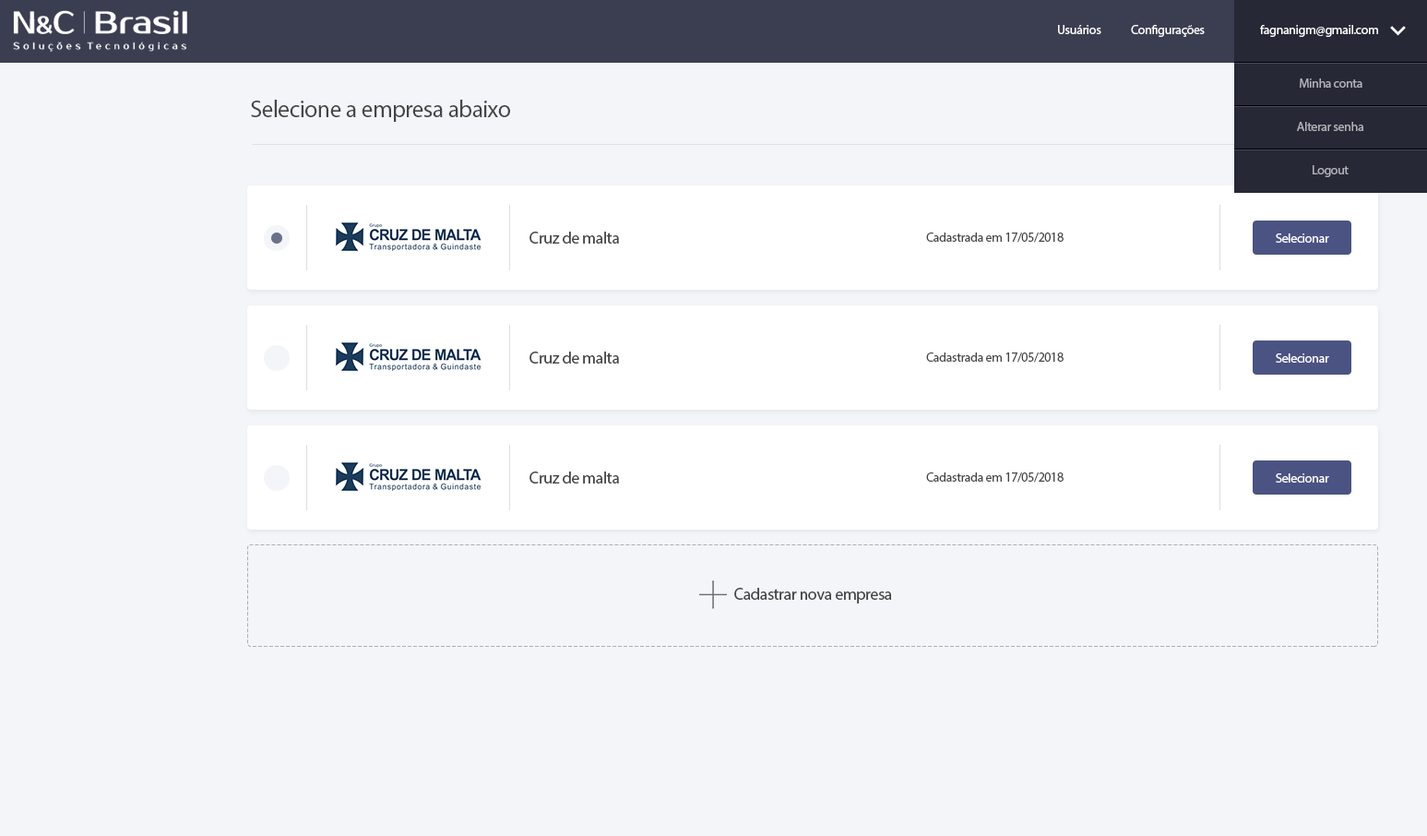
<style>
.page{position:relative;width:1427px;height:836px;background:#f3f5f9}
.page>*{position:absolute;margin:0}
.t1{font:12.9px "MyriadPro-Regular";letter-spacing:-0.025em;color:#ffffff}
.t2{font:12.9px "MyriadPro-Regular";letter-spacing:-0.025em;color:#b2b2b5}
.t3{font:24px "MyriadPro-Regular";letter-spacing:-0.025em;color:#454545}
.t4{font:16.6px "MyriadPro-Regular";letter-spacing:-0.025em;color:#454545}
.t5{font:12.9px "MyriadPro-Regular";letter-spacing:-0.025em;color:#454545}
</style>
<div class="page">
<p class="t1" style="left:1058px;top:25px;width:43px;height:9px">Usuários</p>
<p class="t1" style="left:1131px;top:25px;width:74px;height:12px">Configurações</p>
<p class="t1" style="left:1260px;top:25px;width:118px;height:12px">fagnanigm@gmail.com</p>
<p class="t2" style="left:1300px;top:78px;width:62px;height:10px">Minha conta</p>
<p class="t3" style="left:251px;top:100px;width:259px;height:22px">Selecione a empresa abaixo</p>
<p class="t2" style="left:1297px;top:122px;width:67px;height:9px">Alterar senha</p>
<p class="t2" style="left:1313px;top:165px;width:36px;height:12px">Logout</p>
<p class="t4" style="left:529px;top:232px;width:90px;height:12px">Cruz de malta</p>
<p class="t5" style="left:926px;top:232px;width:137px;height:11px">Cadastrada em 17/05/2018</p>
<p class="t1" style="left:1276px;top:233px;width:53px;height:10px">Selecionar</p>
<p class="t4" style="left:529px;top:351px;width:90px;height:12px">Cruz de malta</p>
<p class="t5" style="left:926px;top:352px;width:137px;height:10px">Cadastrada em 17/05/2018</p>
<p class="t1" style="left:1276px;top:353px;width:53px;height:9px">Selecionar</p>
<p class="t4" style="left:529px;top:471px;width:90px;height:12px">Cruz de malta</p>
<p class="t5" style="left:926px;top:472px;width:137px;height:10px">Cadastrada em 17/05/2018</p>
<p class="t1" style="left:1276px;top:473px;width:53px;height:9px">Selecionar</p>
<p class="t4" style="left:734px;top:588px;width:158px;height:15px">Cadastrar nova empresa</p>
</div>
